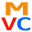
<style>
.page{position:relative;width:32px;height:32px;background:#ffffff}
.page>*{position:absolute;margin:0}
.t1{font:17.6px "DejaVuSansMono";letter-spacing:0.01em;color:#fd8a03;font-weight:bold;scale:2.27 1}
.t2{font:17.2px "DejaVuSansMono";color:#fd1503;font-weight:bold;scale:1.56 1}
.t3{font:17.2px "DejaVuSansMono";color:#0361fd;font-weight:bold;scale:1.56 1}
</style>
<div class="page">
<p class="t1" style="left:5px;top:2px;width:23px;height:14px">M</p>
<p class="t2" style="left:1px;top:17px;width:30px;height:14px">V<span class="t3">C</span></p>
</div>
